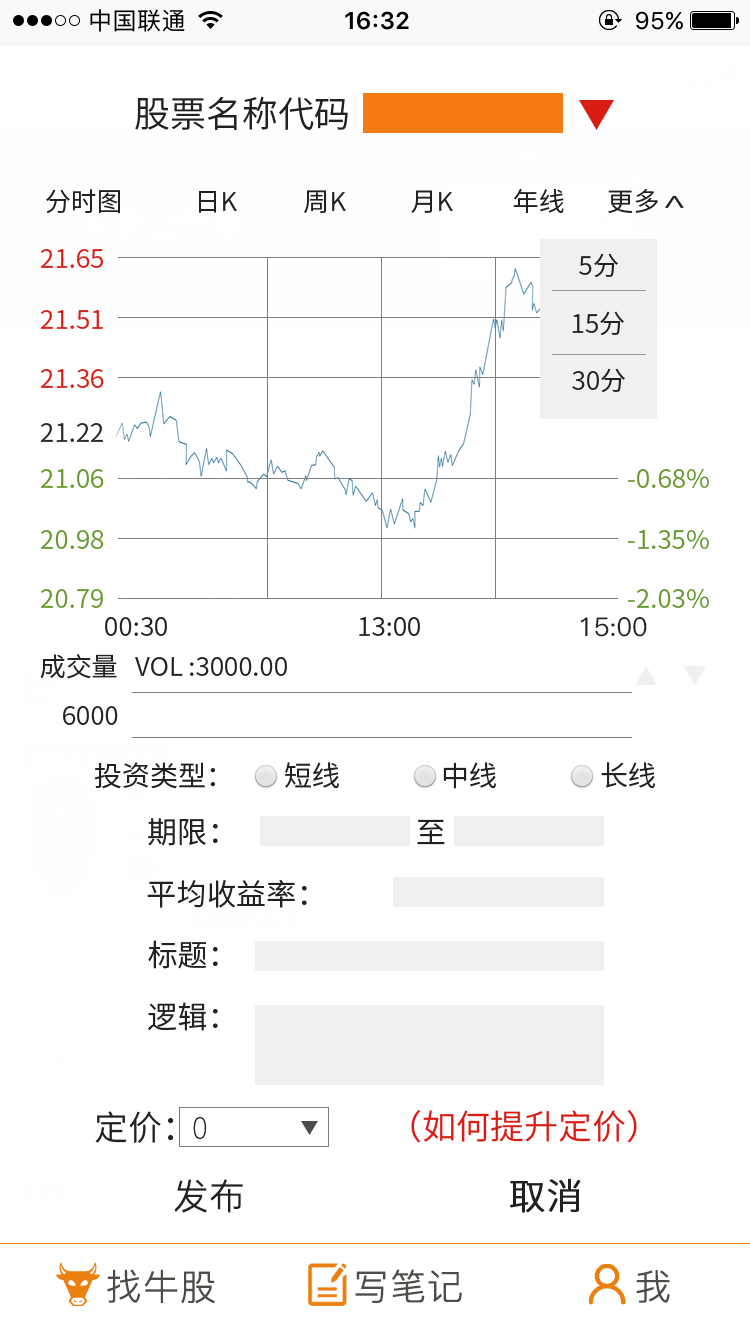
<style>
.page{position:relative;width:750px;height:1334px;background:#ffffff}
.page>*{position:absolute;margin:0}
.t1{font:36px "SourceHanSansCN-Normal";color:#212121}
.t2{font:26px "SourceHanSansCN-Normal";color:#212121}
.t3{font:42.6px "SourceHanSansCN-Normal";color:#212121;scale:0.58 1}
.t4{font:26px "SourceHanSansCN-Normal";color:#d91d15}
.t5{font:26px "SourceHanSansCN-Normal";color:#252525}
.t6{font:26px "SourceHanSansCN-Normal";color:#65992d}
.t7{font:26px "PingFang-SC-Medium";color:#212121}
.t8{font:28px "SourceHanSansCN-Normal";color:#212121}
.t9{font:30px "SourceHanSansCN-Normal";color:#212121}
.t10{font:34px "SourceHanSansCN-Normal";color:#d91d15}
.t11{font:30px "SourceHanSansCN-ExtraLight";color:#212121}
.t12{font:36px "PingFang-SC-Medium";color:#212121}
.t13{font:36px "SourceHanSansCN-Light";color:#212121;font-weight:bold}
.t14{font:36px "PingFang-SC-Regular";color:#4f4c47;font-weight:bold}
</style>
<div class="page">
<p class="t1" style="left:135px;top:96px;width:213px;height:34px">股票名称代码</p>
<p class="t2" style="left:46px;top:189px;width:74px;height:25px">分时图</p>
<p class="t2" style="left:199px;top:191px;width:38px;height:22px">日K</p>
<p class="t2" style="left:304px;top:190px;width:42px;height:23px">周K</p>
<p class="t2" style="left:411px;top:190px;width:42px;height:23px">月K</p>
<p class="t2" style="left:513px;top:189px;width:51px;height:24px">年线</p>
<p class="t2" style="left:608px;top:189px;width:50px;height:24px">更多</p>
<p class="t3" style="left:665px;top:196px;width:19px;height:12px;rotate:-90deg">&gt;</p>
<p class="t4" style="left:40px;top:249px;width:63px;height:19px">21.65</p>
<p class="t2" style="left:579px;top:253px;width:39px;height:25px">5分</p>
<p class="t4" style="left:40px;top:310px;width:63px;height:19px">21.51</p>
<p class="t2" style="left:572px;top:311px;width:52px;height:25px">15分</p>
<p class="t4" style="left:40px;top:369px;width:64px;height:19px">21.36</p>
<p class="t2" style="left:572px;top:368px;width:53px;height:25px">30分</p>
<p class="t5" style="left:40px;top:423px;width:63px;height:19px">21.22</p>
<p class="t6" style="left:40px;top:469px;width:64px;height:19px">21.06</p>
<p class="t6" style="left:628px;top:469px;width:81px;height:19px">-0.68%</p>
<p class="t6" style="left:40px;top:530px;width:64px;height:19px">20.98</p>
<p class="t6" style="left:628px;top:530px;width:81px;height:19px">-1.35%</p>
<p class="t6" style="left:40px;top:589px;width:63px;height:19px">20.79</p>
<p class="t6" style="left:628px;top:589px;width:81px;height:19px">-2.03%</p>
<p class="t2" style="left:105px;top:617px;width:62px;height:19px">00:30</p>
<p class="t2" style="left:359px;top:617px;width:61px;height:19px">13:00</p>
<p class="t7" style="left:580px;top:616px;width:67px;height:21px">15:00</p>
<p class="t2" style="left:40px;top:654px;width:247px;height:25px">成交量   VOL :3000.00</p>
<p class="t2" style="left:63px;top:706px;width:55px;height:19px">6000</p>
<p class="t8" style="left:94px;top:762px;width:121px;height:27px">投资类型：</p>
<p class="t8" style="left:285px;top:762px;width:54px;height:27px">短线</p>
<p class="t8" style="left:443px;top:762px;width:53px;height:27px">中线</p>
<p class="t8" style="left:601px;top:762px;width:54px;height:27px">长线</p>
<p class="t9" style="left:148px;top:818px;width:70px;height:28px">期限：</p>
<p class="t9" style="left:417px;top:819px;width:28px;height:26px">至</p>
<p class="t9" style="left:147px;top:880px;width:160px;height:28px">平均收益率：</p>
<p class="t9" style="left:148px;top:940px;width:70px;height:29px">标题：</p>
<p class="t9" style="left:148px;top:1002px;width:70px;height:29px">逻辑：</p>
<p class="t10" style="left:411px;top:1110px;width:226px;height:33px">（如何提升定价）</p>
<p class="t11" style="left:193px;top:1117px;width:13px;height:22px">0</p>
<p class="t12" style="left:174px;top:1179px;width:69px;height:34px">发布</p>
<p class="t13" style="left:510px;top:1178px;width:71px;height:35px">取消</p>
<p class="t14" style="left:107px;top:1269px;width:108px;height:35px">找牛股</p>
<p class="t14" style="left:355px;top:1269px;width:107px;height:34px">写笔记</p>
<p class="t14" style="left:636px;top:1270px;width:34px;height:33px">我</p>
</div>
